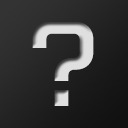
<style>
.page{position:relative;width:128px;height:128px}
.page>*{position:absolute;margin:0}
.t1{font:119.8px "BFHud-SemiBold"}
</style>
<div class="page">
<p class="t1" style="left:32px;top:22px;width:62px;height:84px">?</p>
</div>
